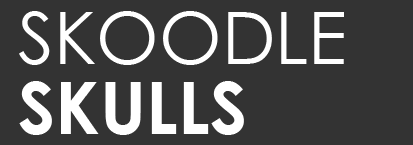
<style>
.page{position:relative;width:413px;height:145px;background:#333333}
.page>*{position:absolute;margin:0}
.t1{font:72px/70px "CenturyGothic";color:#ffffff}
.t2{font:72px/70px "CenturyGothic-Bold";color:#ffffff}
</style>
<div class="page">
<p class="t1" style="left:19px;top:11px;width:325px;height:124px">SKOODLE<br><span class="t2">SKULLS</span></p>
</div>
